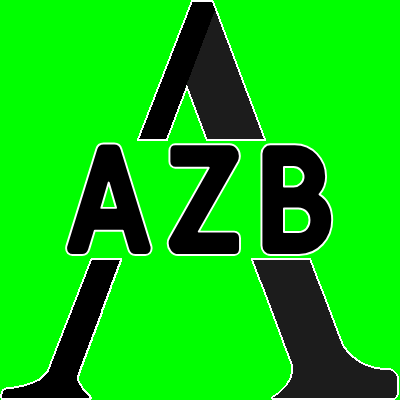
<style>
.page{position:relative;width:400px;height:400px;background:#00ff00}
.page>*{position:absolute;margin:0}
.t1{font:157px "Fulbo-Champagne";color:#000000}
</style>
<div class="page">
<p class="t1" style="left:59px;top:136px;width:281px;height:126px">AZB</p>
</div>
